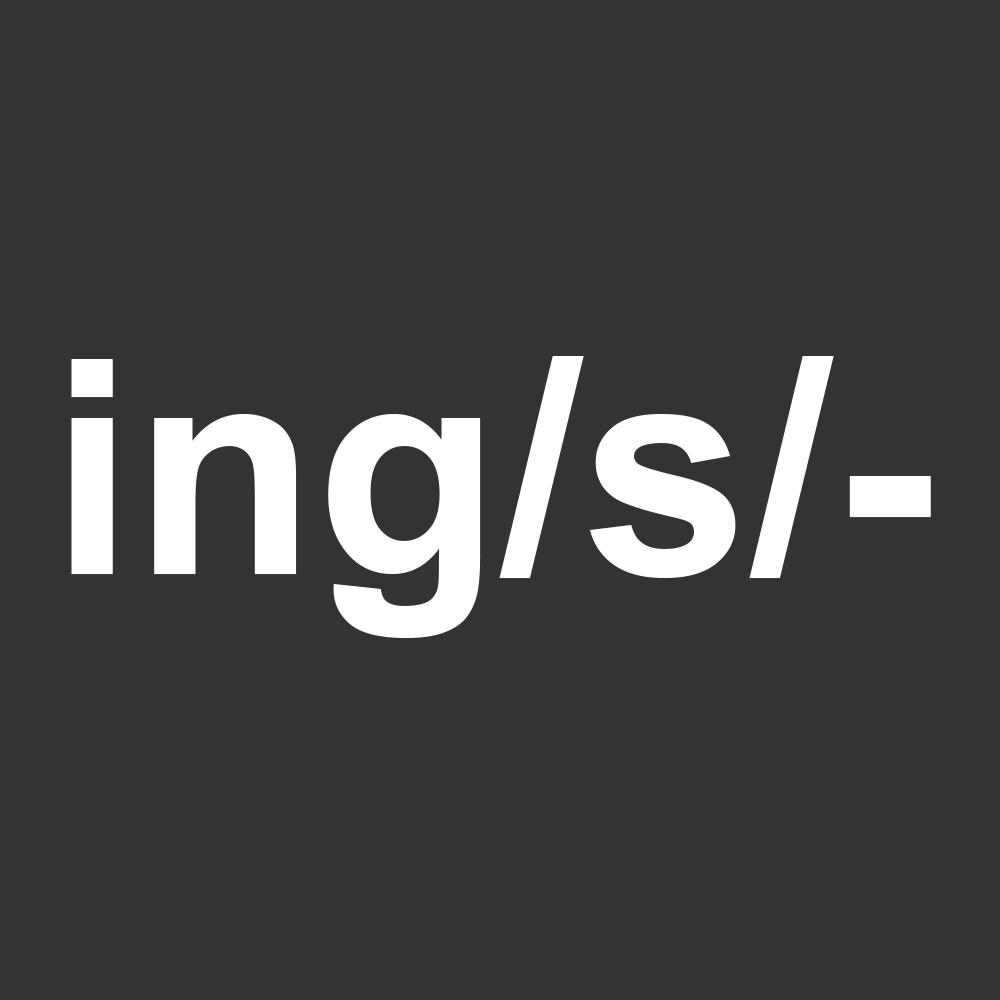
<style>
.page{position:relative;width:1000px;height:1000px;background:#333333}
.page>*{position:absolute;margin:0}
.t1{font:300px "Arial-BoldMT";color:#ffffff}
</style>
<div class="page">
<p class="t1" style="left:71px;top:356px;width:860px;height:282px">ing/s/-</p>
</div>
